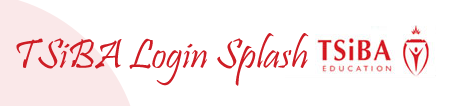
<style>
.page{position:relative;width:453px;height:106px;background:#ffffff}
.page>*{position:absolute;margin:0}
.t1{font:42px "Pristina-Regular";color:#ce1d25}
</style>
<div class="page">
<p class="t1" style="left:16px;top:33px;width:293px;height:53px">TSiBA Login Splash</p>
</div>
